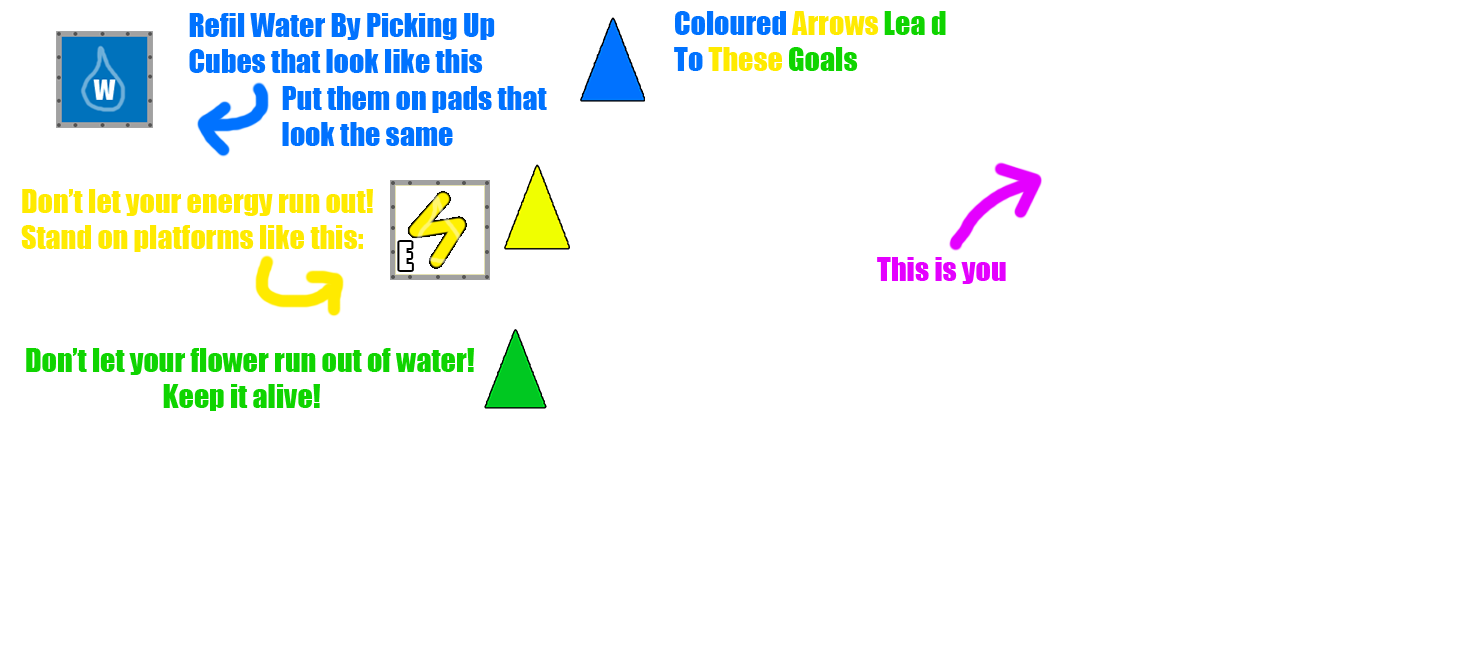
<style>
.page{position:relative;width:1466px;height:656px;background:#ffffff}
.page>*{position:absolute;margin:0}
.t1{font:30px "Impact";color:#0072ff}
.t2{font:30px "Impact";color:#ffea00}
.t3{font:30px "Impact";color:#0fd400}
.t4{font:30px "Impact";color:#e400ff}
</style>
<div class="page">
<p class="t1" style="left:189px;top:13px;width:306px;height:60px">Refil Water By Picking Up <br>Cubes that look like this</p>
<p class="t1" style="left:674px;top:11px;width:272px;height:60px">Coloured <span class="t2">Arrows</span><span class="t3"> Lea d<br></span>To <span class="t2">These</span><span class="t3"> Goals</span></p>
<p class="t1" style="left:282px;top:86px;width:265px;height:60px">Put them on pads that <br>look the same</p>
<p class="t2" style="left:21px;top:189px;width:352px;height:63px">Don’t let your energy run out!<br>Stand on platforms like this:</p>
<p class="t4" style="left:877px;top:257px;width:129px;height:27px">This is you</p>
<p class="t3" style="left:26px;top:348px;width:448px;height:63px">Don’t let your flower run out of water!<br>                          Keep it alive!</p>
</div>
